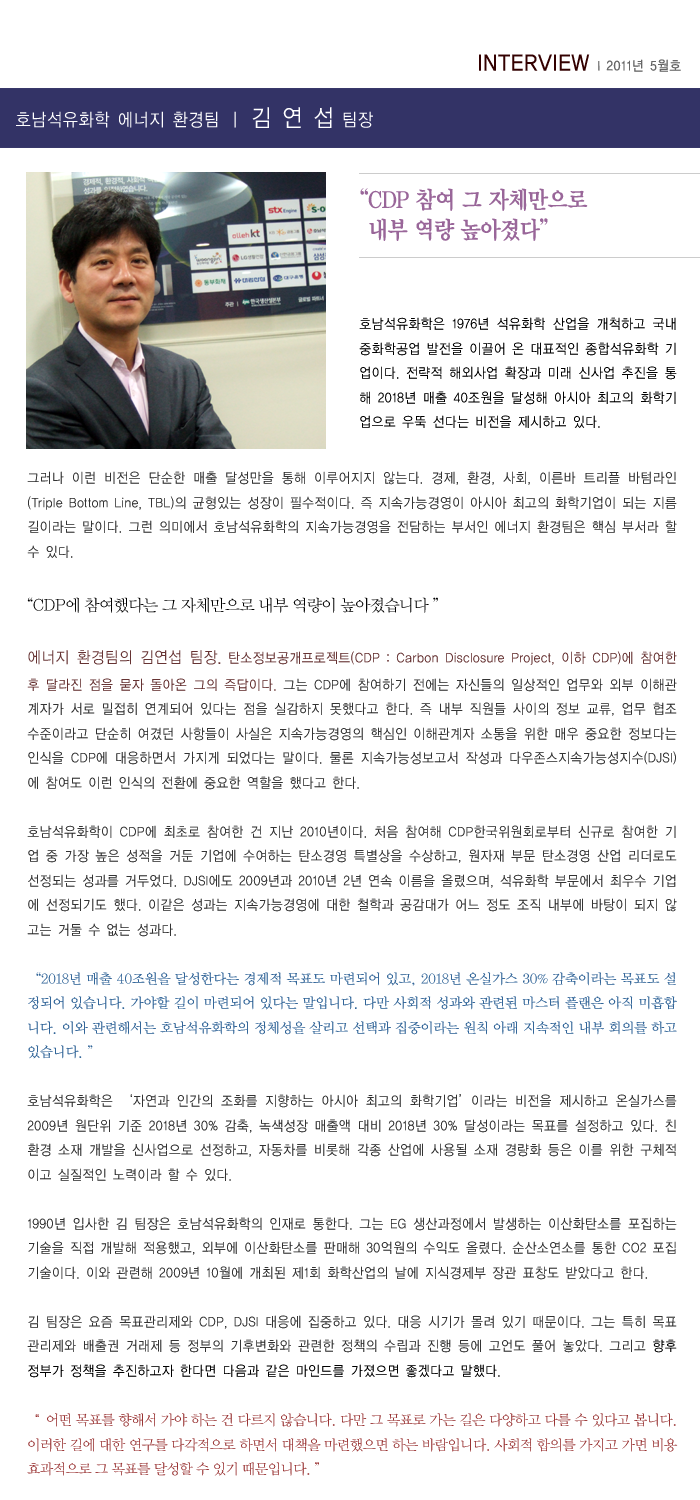
<style>
.page{position:relative;width:700px;height:1500px;background:#ffffff}
.page>*{position:absolute;margin:0}
.t1{font:14px "YDIYGO130-KSCpc-EUC-H";letter-spacing:-0.025em;color:#666666;scale:0.9 1}
.t2{font:24px "YDIYGO130-KSCpc-EUC-H";letter-spacing:-0.025em;color:#330000;scale:0.9 1}
.t3{font:18px "YDIYGO120-KSCpc-EUC-H";letter-spacing:-0.025em;color:#ffffff;scale:0.9 1}
.t4{font:24px "YDIYGO120-KSCpc-EUC-H";letter-spacing:-0.025em;color:#ffffff;scale:0.9 1}
.t5{font:24px/30px "YDIYMjO150";letter-spacing:-0.025em;color:#996699;scale:0.9 1}
.t6{font:14px "YDIYGO120-KSCpc-EUC-H";letter-spacing:-0.025em;color:#000000;scale:0.9 1}
.t7{font:14px "YDIYGO120-KSCpc-EUC-H";letter-spacing:-0.025em;color:#333333;scale:0.9 1}
.t8{font:16px "YDIWebBatan";letter-spacing:-0.025em;color:#000000}
.t9{font:16px "YDIYGO120-KSCpc-EUC-H";letter-spacing:-0.025em;color:#663333;scale:0.9 1}
.t10{font:14px "YDIYGO120-KSCpc-EUC-H";letter-spacing:-0.025em;color:#663333;scale:0.9 1}
.t11{font:14px "YDIYMjO130";letter-spacing:-0.025em;color:#336699}
.t12{font:14px "YDIYGO120-KSCpc-EUC-H";letter-spacing:-0.025em;color:#993333;scale:0.9 1}
.t13{font:14px "YDIWebBatan";letter-spacing:-0.025em;color:#993333}
</style>
<div class="page">
<p class="t1" style="left:479px;top:54px;width:202px;height:18px"><span class="t2">INTERVIEW </span>l 2011년 5월호</p>
<p class="t3" style="left:16px;top:107px;width:357px;height:21px">호남석유화학 에너지 환경팀 ㅣ <span class="t4">김 연 섭</span> 팀장</p>
<p class="t5" style="left:360px;top:188px;width:228px;height:53px">“CDP 참여 그 자체만으로<br>   내부 역량 높아졌다”</p>
<p class="t6" style="left:359px;top:317px;width:318px;height:111px;text-align:justify">호남석유화학은 1976년 석유화학 산업을 개척하고 국내 중화학공업 발전을 이끌어 온 대표적인 종합석유화학 기업이다. 전략적 해외사업 확장과 미래 신사업 추진을 통해 2018년 매출 40조원을 달성해 아시아 최고의 화학기업으로 우뚝 선다는 비전을 제시하고 있다.</p>
<p class="t7" style="left:27px;top:471px;width:651px;height:1005px;text-align:justify">그러나 이런 비전은 단순한 매출 달성만을 통해 이루어지지 않는다. 경제, 환경, 사회, 이른바 트리플 바텀라인(Triple Bottom Line, TBL)의 균형있는 성장이 필수적이다. 즉 지속가능경영이 아시아 최고의 화학기업이 되는 지름길이라는 말이다. 그런 의미에서 호남석유화학의 지속가능경영을 전담하는 부서인 에너지 환경팀은 핵심 부서라 할 수 있다. <br>   <br><span class="t8">“CDP에 참여했다는 그 자체만으로 내부 역량이 높아졌습니다｣”<br><br></span><span class="t9">에너지 환경팀의 김연섭 팀장.</span><span class="t10"> 탄소정보공개프로젝트(CDP : Carbon Disclosure Project, 이하 CDP)에 참여한 후 달라진 점을 묻자 돌아온 그의 즉답이다. </span>그는 CDP에 참여하기 전에는 자신들의 일상적인 업무와 외부 이해관계자가 서로 밀접히 연계되어 있다는 점을 실감하지 못했다고 한다. 즉 내부 직원들 사이의 정보 교류, 업무 협조 수준이라고 단순히 여겼던 사항들이 사실은 지속가능경영의 핵심인 이해관계자 소통을 위한 매우 중요한 정보다는 인식을 CDP에 대응하면서 가지게 되었다는 말이다. 물론 지속가능성보고서 작성과 다우존스지속가능성지수(DJSI)에 참여도 이런 인식의 전환에 중요한 역할을 했다고 한다.<br> <br>호남석유화학이 CDP에 최초로 참여한 건 지난 2010년이다. 처음 참여해 CDP한국위원회로부터 신규로 참여한 기업 중 가장 높은 성적을 거둔 기업에 수여하는 탄소경영 특별상을 수상하고, 원자재 부문 탄소경영 산업 리더로도 선정되는 성과를 거두었다. DJSI에도 2009년과 2010년 2년 연속 이름을 올렸으며, 석유화학 부문에서 최우수 기업에 선정되기도 했다. 이같은 성과는 지속가능경영에 대한 철학과 공감대가 어느 정도 조직 내부에 바탕이 되지 않고는 거둘 수 없는 성과다. <br><br><span class="t11">“2018년 매출 40조원을 달성한다는 경제적 목표도 마련되어 있고, 2018년 온실가스 30% 감축이라는 목표도 설정되어 있습니다. 가야할 길이 마련되어 있다는 말입니다. 다만 사회적 성과와 관련된 마스터 플랜은 아직 미흡합니다. 이와 관련해서는 호남석유화학의 정체성을 살리고 선택과 집중이라는 원칙 아래 지속적인 내부 회의를 하고 있습니다.｣”<br></span><br>호남석유화학은 ‘자연과 인간의 조화를 지향하는 아시아 최고의 화학기업’이라는 비전을 제시하고 온실가스를 2009년 원단위 기준 2018년 30% 감축, 녹색성장 매출액 대비 2018년 30% 달성이라는 목표를 설정하고 있다. 친환경 소재 개발을 신사업으로 선정하고, 자동차를 비롯해 각종 산업에 사용될 소재 경량화 등은 이를 위한 구체적이고 실질적인 노력이라 할 수 있다. <br><br>1990년 입사한 김 팀장은 호남석유화학의 인재로 통한다. 그는 EG 생산과정에서 발생하는 이산화탄소를 포집하는 기술을 직접 개발해 적용했고, 외부에 이산화탄소를 판매해 30억원의 수익도 올렸다. 순산소연소를 통한 CO2 포집 기술이다. 이와 관련해 2009년 10월에 개최된 제1회 화학산업의 날에 지식경제부 장관 표창도 받았다고 한다. <br><br>김 팀장은 요즘 목표관리제와 CDP, DJSI 대응에 집중하고 있다. 대응 시기가 몰려 있기 때문이다. 그는 특히 목표관리제와 배출권 거래제 등 정부의 기후변화와 관련한 정책의 수립과 진행 등에 고언도 풀어 놓았다. 그리고 <span class="t6">향후 정부가 정책을 추진하고자 한다면 다음과 같은 마인드를 가졌으면 좋겠다고 말했다.  <br><br></span><span class="t12">“ </span><span class="t13">어떤 목표를 향해서 가야 하는 건 다르지 않습니다. 다만 그 목표로 가는 길은 다양하고 다를 수 있다고 봅니다. 이러한 길에 대한 연구를 다각적으로 하면서 대책을 마련했으면 하는 바람입니다. 사회적 합의를 가지고 가면 비용효과적으로 그 목표를 달성할 수 있기 때문입니다.｣”</span></p>
</div>
